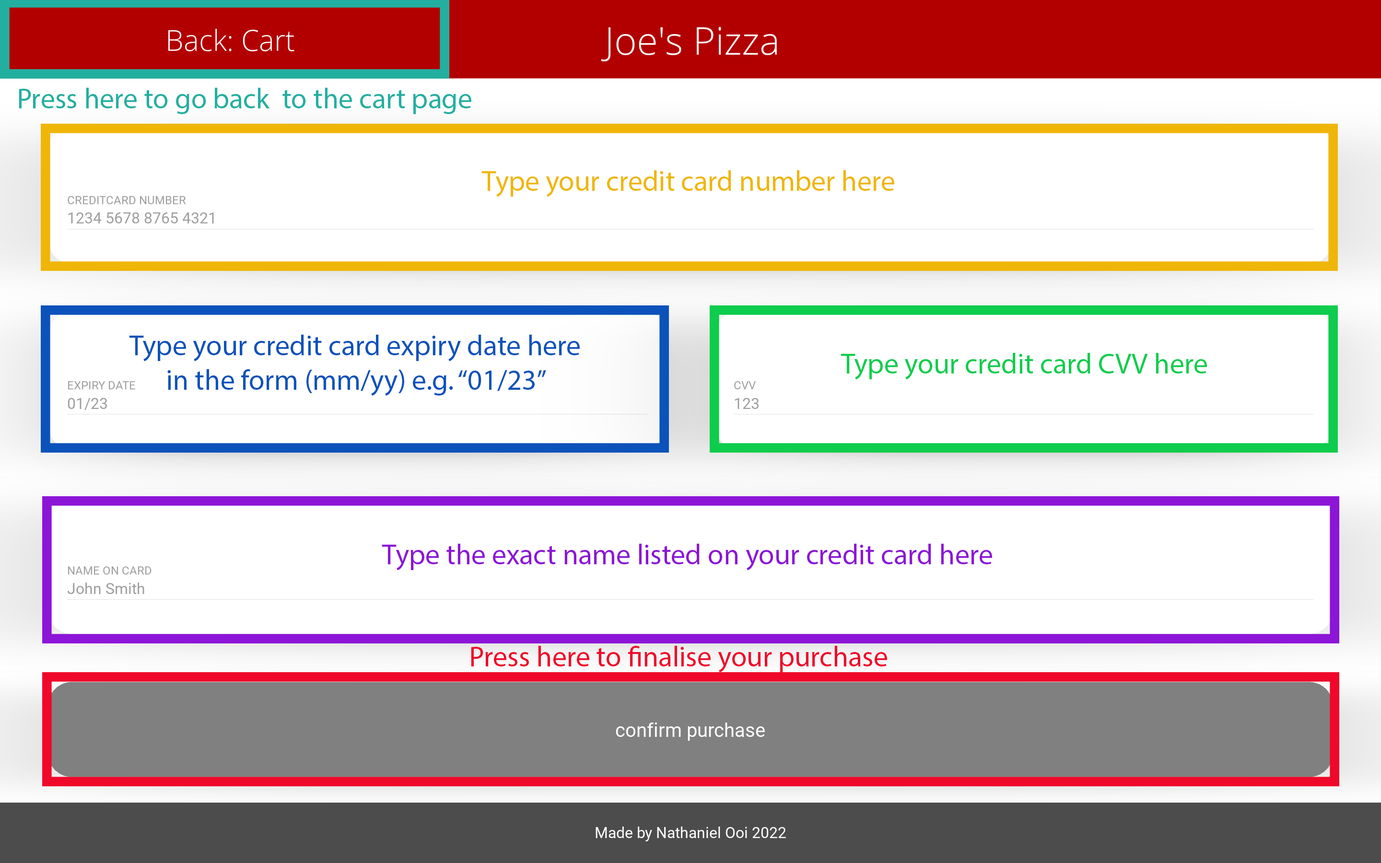
<style>
.page{position:relative;width:1381px;height:863px;background:#ffffff}
.page>*{position:absolute;margin:0}
.t1{font:28.8px "MyriadPro-Regular";color:#23afa0}
.t2{font:28.8px "MyriadPro-Regular";color:#efb608}
.t3{font:28.8px "MyriadPro-Regular";color:#0c52ba}
.t4{font:28.8px "MyriadPro-Regular";color:#0ecd4d}
.t5{font:28.8px "MyriadPro-Regular";color:#8c15d7}
.t6{font:28.8px "MyriadPro-Regular";color:#ef0829}
</style>
<div class="page">
<p class="t1" style="left:19px;top:88px;width:452px;height:26px">Press here to go back  to the cart page</p>
<p class="t2" style="left:482px;top:170px;width:412px;height:27px">Type your credit card number here</p>
<p class="t3" style="left:129px;top:335px;width:451px;height:61px;text-align:center">Type your credit card expiry date here<br>in the form (mm/yy) e.g. “01/23”</p>
<p class="t4" style="left:841px;top:353px;width:366px;height:27px">Type your credit card CVV here</p>
<p class="t5" style="left:382px;top:544px;width:610px;height:27px">Type the exact name listed on your credit card here</p>
<p class="t6" style="left:471px;top:646px;width:416px;height:27px">Press here to finalise your purchase</p>
</div>
